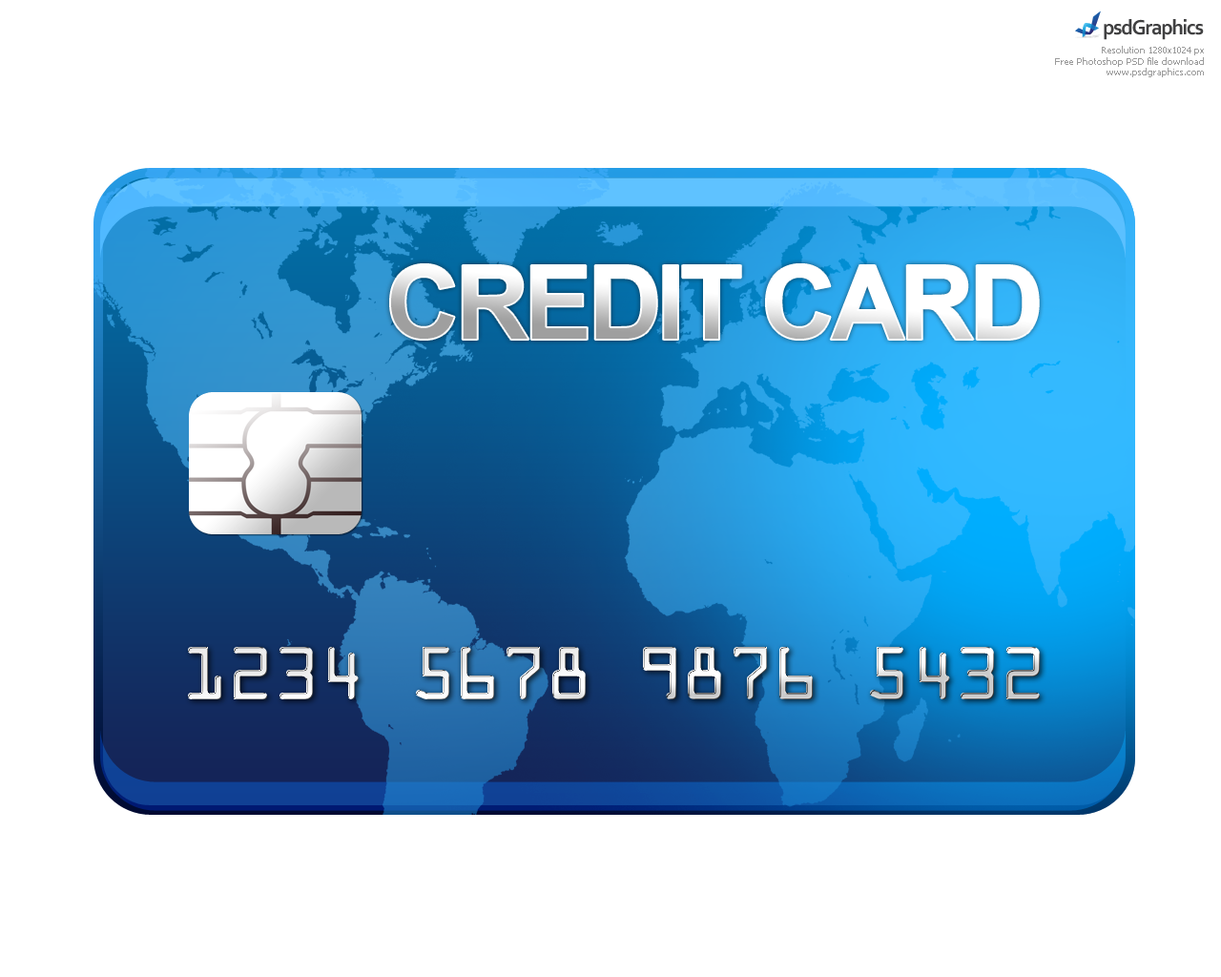
<style>
.page{position:relative;width:1221px;height:977px;background:#ffffff}
.page>*{position:absolute;margin:0}
.t1{font:9.3px "Tahoma";color:#9c9c9c}
.t2{font:103px "Arial-BoldMT";letter-spacing:-0.05em;color:#ffffff}
.t3{font:67.8px "OCRAStd";letter-spacing:-0.05em}
</style>
<div class="page">
<p class="t1" style="left:1055px;top:46px;width:149px;height:31px;text-align:right">Resolution 1280x1024 px<br>Free Photoshop PSD file download<br>www.psdgraphics.com</p>
<p class="t2" style="left:390px;top:264px;width:649px;height:76px">CREDIT CARD</p>
<p class="t3" style="left:188px;top:647px;width:852px;height:52px">1234 5678 9876 5432</p>
</div>
